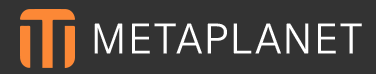
<style>
.page{position:relative;width:376px;height:74px;background:#333333}
.page>*{position:absolute;margin:0}
.t1{font:40px "KoPubWorldDotumMedium";letter-spacing:0.05em;color:#ffffff}
</style>
<div class="page">
<p class="t1" style="left:94px;top:23px;width:268px;height:31px">METAPLANET</p>
</div>
